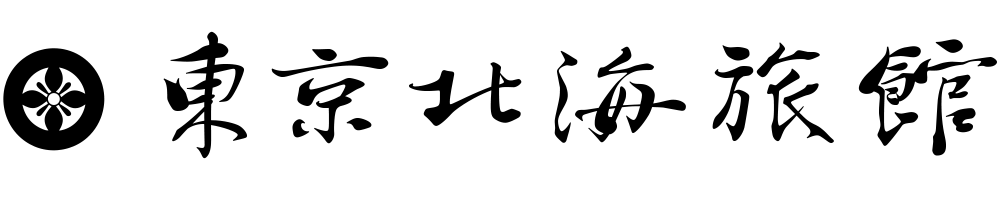
<style>
.page{position:relative;width:1000px;height:200px;background:#ffffff}
.page>*{position:absolute;margin:0}
.t1{font:104.7px "KazurakiSP2N-Light";letter-spacing:0.2em;color:#000000}
</style>
<div class="page">
<p class="t1" style="left:163px;top:31px;width:834px;height:128px">東京北海旅館</p>
</div>
